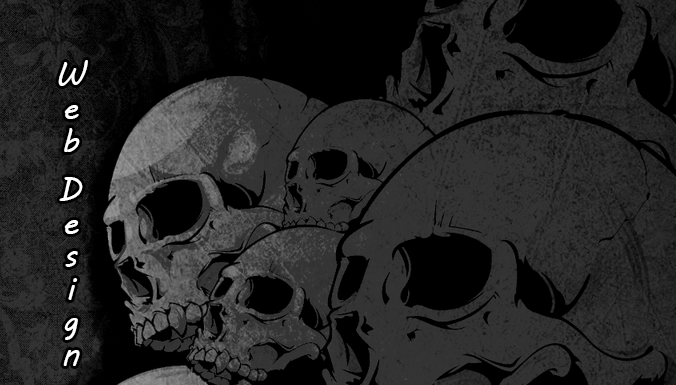
<style>
.page{position:relative;width:676px;height:385px;background:#000000}
.page>*{position:absolute;margin:0}
.t1{font:33px "MVBoli";color:#fffefe}
</style>
<div class="page">
<p class="t1" style="left:58px;top:60px;width:30px;height:306px;text-align:center">Web Design</p>
</div>
